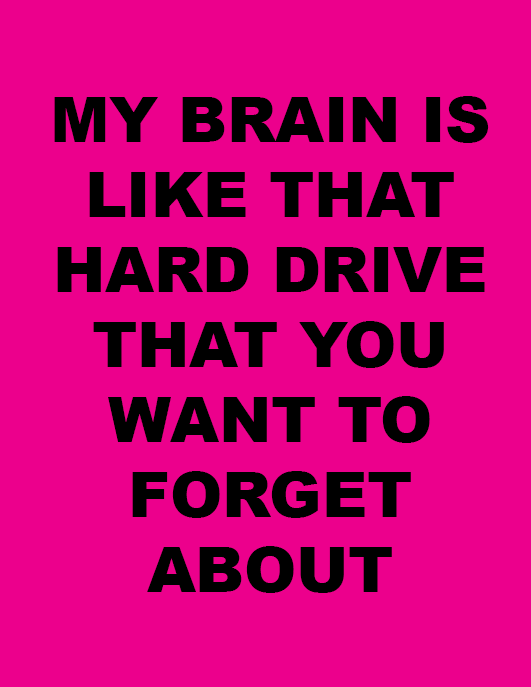
<style>
.page{position:relative;width:531px;height:687px;background:#ec008c}
.page>*{position:absolute;margin:0}
.t1{font:62.5px "Arial-Black";color:#000000}
</style>
<div class="page">
<p class="t1" style="left:54px;top:96px;width:435px;height:497px;text-align:center">MY BRAIN IS LIKE THAT HARD DRIVE THAT YOU WANT TO FORGET ABOUT</p>
</div>
